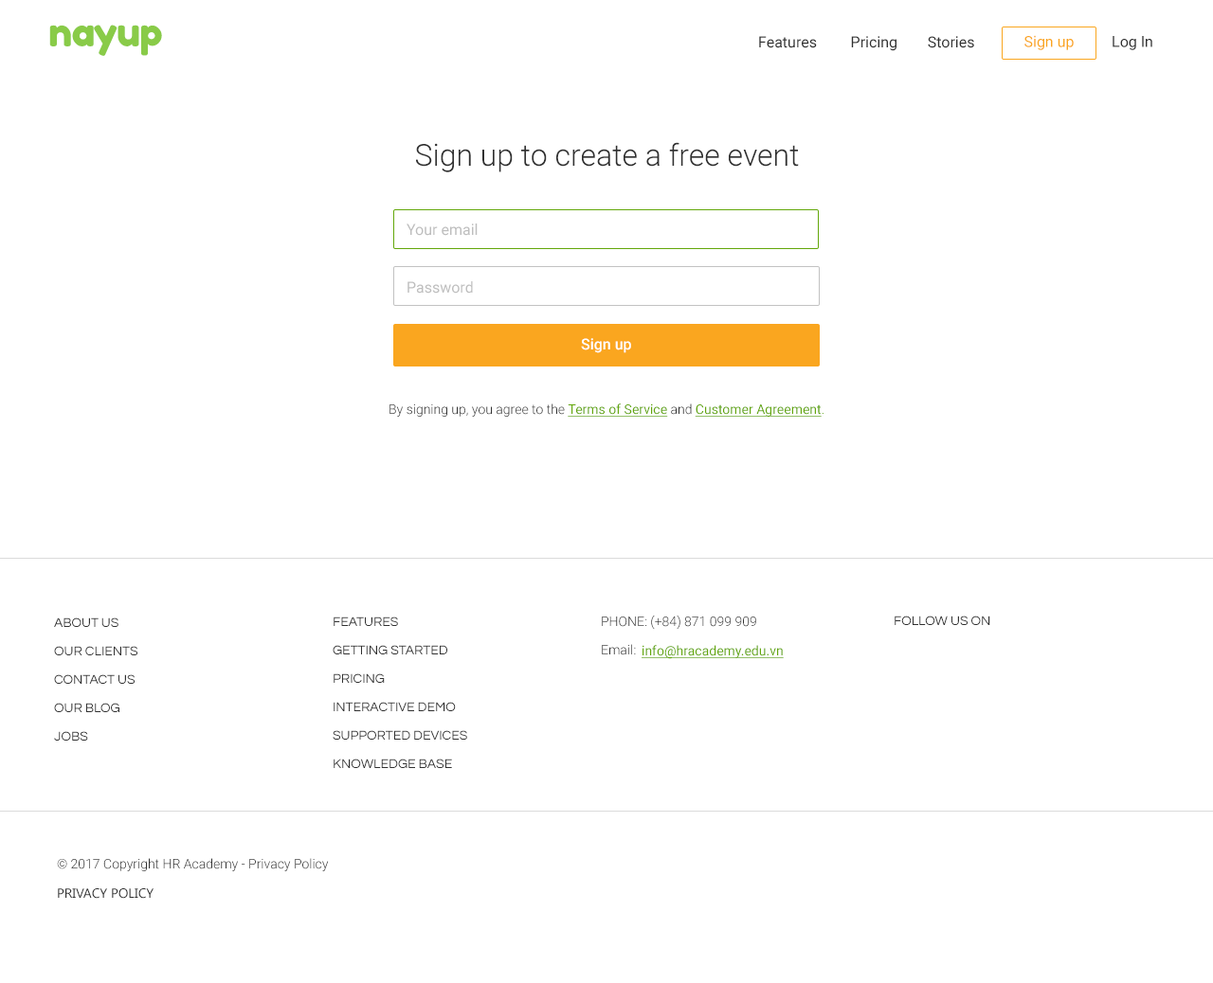
<style>
.page{position:relative;width:1213px;height:983px;background:#ffffff}
.page>*{position:absolute;margin:0}
.t1{font:39.8px "FredokaOne-Regular";letter-spacing:-0.025em;color:#89cb48}
.t2{font:15.2px "Roboto-Regular";color:#303030}
.t3{font:15.2px "Roboto-Regular";color:#faa61f}
.t4{font:15.2px "Roboto-Regular";color:#faa61f;text-transform:uppercase}
.t5{font:30.3px "Roboto-Light";color:#303030}
.t6{font:15.2px "Roboto-Regular";color:#bebebe}
.t7{font:15.2px "Roboto-Medium";color:#ffffff}
.t8{font:13.3px "Roboto-Light";color:#303030}
.t9{font:13.3px "Roboto-Regular";color:#63a70a;text-decoration:underline}
.t10{font:13.3px "Roboto-Light";color:#63a70a}
.t11{font:13.3px/28.4px "Questrial-Regular";color:#303030;text-transform:uppercase}
.t12{font:13.3px/28.4px "Roboto-Light";color:#303030;text-transform:uppercase}
.t13{font:13.3px/28.4px "Roboto-Light";color:#303030}
.t14{font:13.3px "Questrial-Regular";color:#303030;text-transform:uppercase}
.t15{font:13.3px "Gadugi";color:#303030;text-transform:uppercase}
</style>
<div class="page">
<p class="t1" style="left:49px;top:25px;width:113px;height:31px">nayup</p>
<p class="t2" style="left:759px;top:36px;width:215px;height:15px">Features         Pricing        Stories</p>
<p class="t3" style="left:1024px;top:35px;width:128px;height:15px"><span class="t4">S</span>ign up     <span class="t2">     Log In</span></p>
<p class="t5" style="left:416px;top:142px;width:383px;height:30px">Sign up to create a free event</p>
<p class="t6" style="left:406px;top:224px;width:71px;height:12px">Your email</p>
<p class="t6" style="left:407px;top:281px;width:66px;height:13px">Password</p>
<p class="t7" style="left:581px;top:338px;width:50px;height:15px">Sign up</p>
<p class="t8" style="left:389px;top:404px;width:434px;height:13px">By signing up, you agree to the <span class="t9">Terms of Service </span>and <span class="t9">Customer Agreement</span><span class="t10">.</span></p>
<p class="t11" style="left:54px;top:618px;width:83px;height:123px">About Us<br>Our Clients<br>Contact Us<br>Our Blog<br>Jobs</p>
<p class="t11" style="left:333px;top:617px;width:134px;height:151px">Features<br>Getting Started<br>Pricing<br>Interactive Demo<br>Supported Devices<br>Knowledge Base</p>
<p class="t12" style="left:602px;top:615px;width:154px;height:41px">Phone: (+84) 871 099 909<br><span class="t13">Email:</span></p>
<p class="t14" style="left:894px;top:616px;width:96px;height:9px">Follow us on</p>
<p class="t9" style="left:641px;top:645px;width:142px;height:14px">info@hracademy.edu.vn</p>
<p class="t8" style="left:57px;top:858px;width:272px;height:14px">© 2017 Copyright HR Academy - Privacy Policy</p>
<p class="t15" style="left:58px;top:889px;width:95px;height:10px">Privacy Policy</p>
</div>
